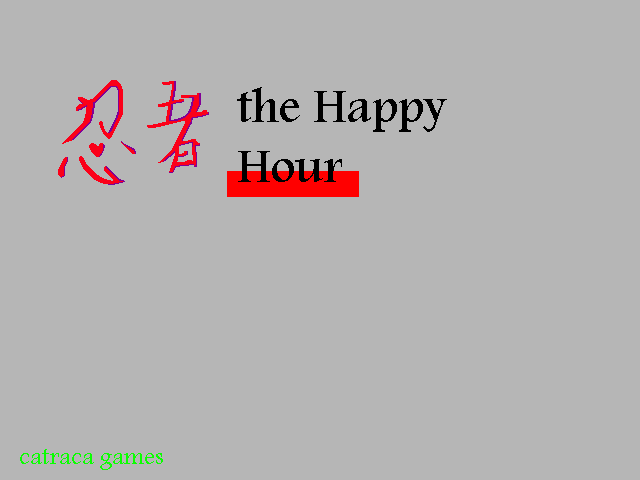
<style>
.page{position:relative;width:640px;height:480px;background:#b6b6b6}
.page>*{position:absolute;margin:0}
.t1{font:50px "Andalus";color:#000000}
</style>
<div class="page">
<p class="t1" style="left:237px;top:87px;width:210px;height:95px">the Happy <br>Hour</p>
</div>
